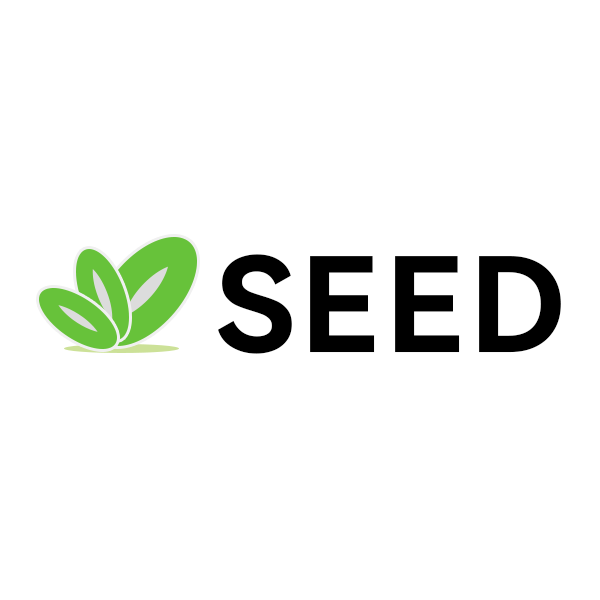
<style>
.page{position:relative;width:600px;height:600px;background:#ffffff}
.page>*{position:absolute;margin:0}
.t1{font:131px "HarmonyOS_Sans_SC_Bold";letter-spacing:0.04em;color:#000000}
</style>
<div class="page">
<p class="t1" style="left:218px;top:254px;width:343px;height:100px">SEED</p>
</div>
